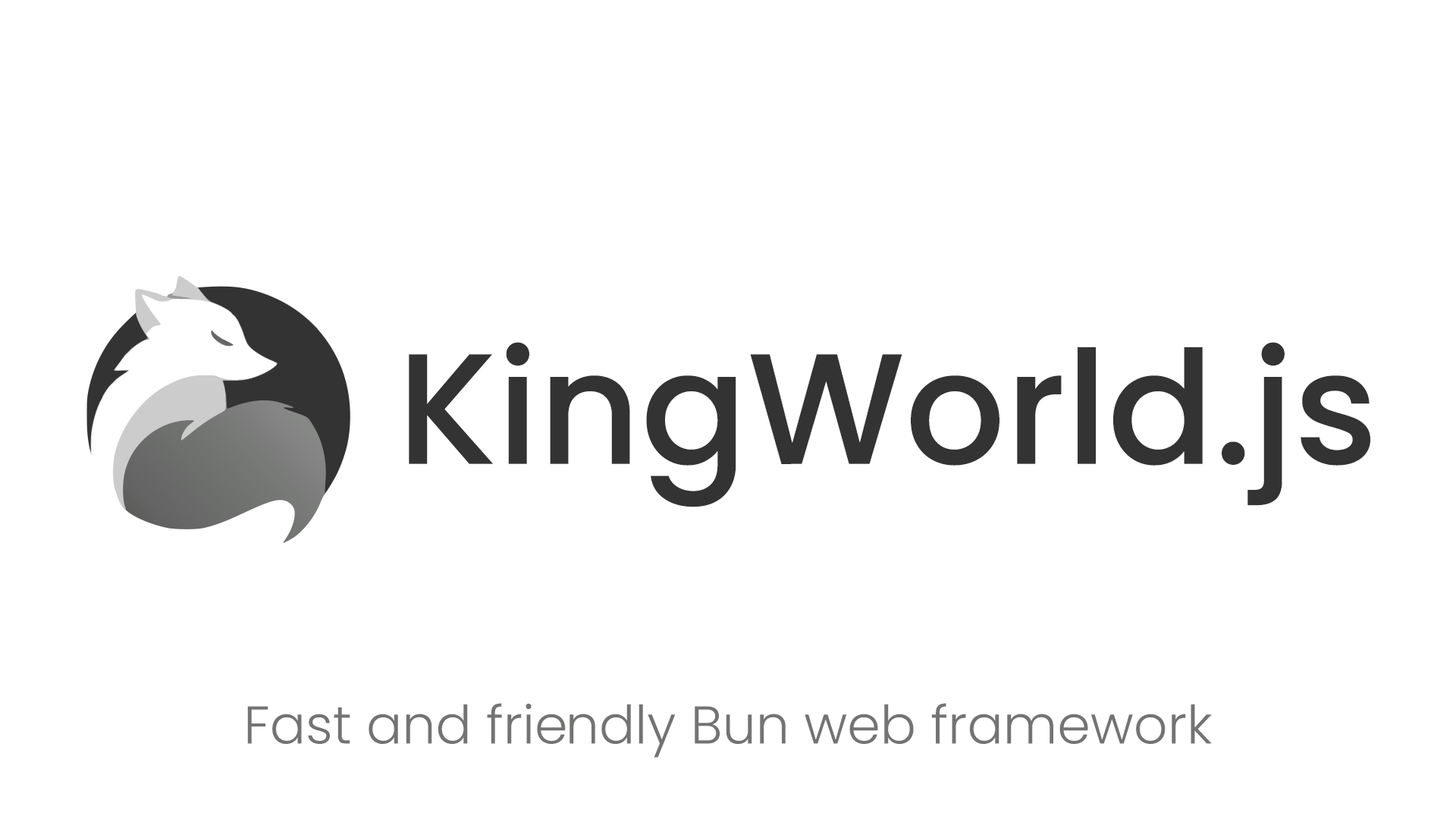
<style>
.page{position:relative;width:1456px;height:819px;background:#ffffff}
.page>*{position:absolute;margin:0}
.t1{font:157.5px "Poppins-Medium";color:#333333}
.t2{font:53.1px "Poppins-Light";color:#727472}
</style>
<div class="page">
<p class="t1" style="left:409px;top:342px;width:961px;height:165px">KingWorld.js</p>
<p class="t2" style="left:247px;top:703px;width:965px;height:55px">Fast and friendly Bun web framework</p>
</div>
